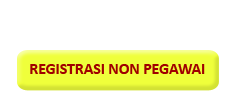
<style>
.page{position:relative;width:237px;height:101px;background:#ffffff}
.page>*{position:absolute;margin:0}
.t1{font:15.7px "Calibri-Bold";color:#9f0000}
</style>
<div class="page">
<p class="t1" style="left:30px;top:64px;width:175px;height:10px">REGISTRASI NON PEGAWAI</p>
</div>
